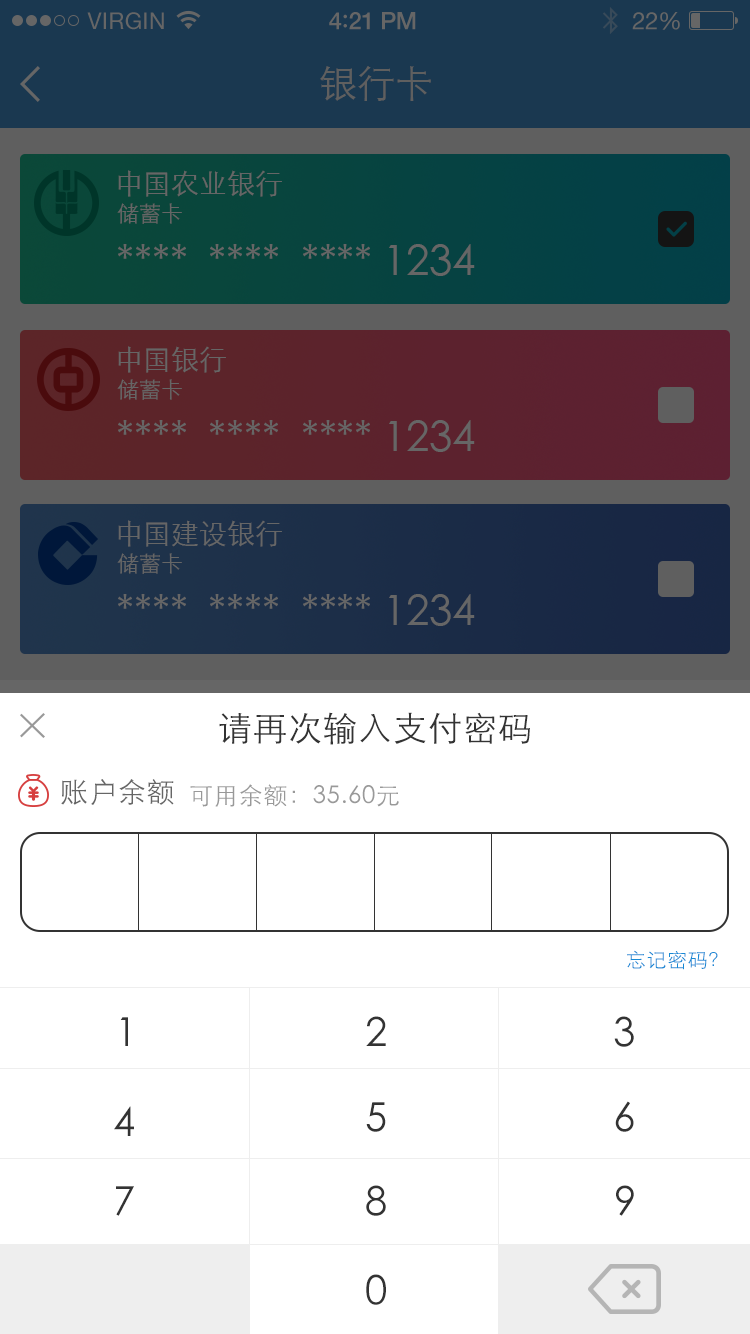
<style>
.page{position:relative;width:750px;height:1334px;background:#ffffff}
.page>*{position:absolute;margin:0}
.t1{font:23px "HelveticaNeue";letter-spacing:0.02em;color:#666666}
.t2{font:24px "HelveticaNeue-Medium";letter-spacing:-0.02em;color:#666666}
.t3{font:26px "Avenir-Medium";letter-spacing:-0.02em;color:#666666}
.t4{font:24px "HelveticaNeue";letter-spacing:-0.02em;color:#666666}
.t5{font:38px "STXihei";color:#5f5f5f}
.t6{font:28px "STXihei";color:#666666}
.t7{font:22px "STXihei";color:#666666}
.t8{font:42px "STXihei";color:#666666}
.t9{font:34px "STXihei";letter-spacing:0.03em;color:#333333}
.t10{font:28px "STXihei";letter-spacing:0.03em;color:#666666}
.t11{font:24px "STXihei";letter-spacing:0.03em;color:#999999}
.t12{font:20px "STXihei";letter-spacing:0.03em;color:#1789d5}
.t13{font:40px "STXihei";letter-spacing:0.03em;color:#333333}
</style>
<div class="page">
<p class="t1" style="left:87px;top:12px;width:77px;height:18px">VIRGIN</p>
<p class="t2" style="left:329px;top:12px;width:87px;height:18px">4<span class="t3">:</span>21 PM</p>
<p class="t4" style="left:632px;top:12px;width:48px;height:18px">22%</p>
<p class="t5" style="left:320px;top:66px;width:111px;height:35px">银行卡</p>
<p class="t6" style="left:118px;top:170px;width:164px;height:27px">中国农业银行</p>
<p class="t7" style="left:117px;top:203px;width:65px;height:21px">储蓄卡</p>
<p class="t8" style="left:118px;top:244px;width:357px;height:32px">****  ****  **** 1234</p>
<p class="t6" style="left:118px;top:346px;width:108px;height:27px">中国银行</p>
<p class="t7" style="left:117px;top:379px;width:65px;height:21px">储蓄卡</p>
<p class="t8" style="left:118px;top:420px;width:357px;height:32px">****  ****  **** 1234</p>
<p class="t6" style="left:118px;top:520px;width:164px;height:27px">中国建设银行</p>
<p class="t7" style="left:117px;top:553px;width:65px;height:21px">储蓄卡</p>
<p class="t8" style="left:118px;top:594px;width:357px;height:32px">****  ****  **** 1234</p>
<p class="t9" style="left:219px;top:712px;width:311px;height:33px">请再次输入支付密码</p>
<p class="t10" style="left:61px;top:779px;width:113px;height:26px">账户余额</p>
<p class="t11" style="left:190px;top:784px;width:209px;height:23px">可用余额：35.60元</p>
<p class="t12" style="left:627px;top:950px;width:91px;height:20px">忘记密码？</p>
<p class="t13" style="left:120px;top:1017px;width:8px;height:29px">1</p>
<p class="t13" style="left:366px;top:1016px;width:20px;height:30px">2</p>
<p class="t13" style="left:614px;top:1016px;width:20px;height:31px">3</p>
<p class="t13" style="left:114px;top:1106px;width:20px;height:30px">4</p>
<p class="t13" style="left:366px;top:1102px;width:20px;height:30px">5</p>
<p class="t13" style="left:615px;top:1101px;width:19px;height:31px">6</p>
<p class="t13" style="left:116px;top:1186px;width:18px;height:30px">7</p>
<p class="t13" style="left:366px;top:1185px;width:20px;height:31px">8</p>
<p class="t13" style="left:616px;top:1185px;width:18px;height:31px">9</p>
<p class="t13" style="left:366px;top:1274px;width:20px;height:31px">0</p>
</div>
